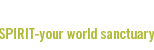
<style>
.page{position:relative;width:154px;height:50px;background:#ffffff}
.page>*{position:absolute;margin:0}
.t1{font:15px "TradeGothic-BoldCondTwenty";color:#b0bb35}
</style>
<div class="page">
<p class="t1" style="left:0px;top:28px;width:155px;height:14px">SPIRIT-your world sanctuary</p>
</div>
